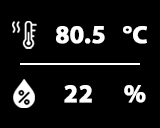
<style>
.page{position:relative;width:160px;height:128px;background:#000000}
.page>*{position:absolute;margin:0}
.t1{font:25px "MyriadPro-Bold";color:#ffffff;font-variant:small-caps;font-weight:bold}
</style>
<div class="page">
<p class="t1" style="left:56px;top:26px;width:49px;height:18px">80.5</p>
<p class="t1" style="left:123px;top:26px;width:24px;height:18px">°C</p>
<p class="t1" style="left:64px;top:85px;width:28px;height:18px">22</p>
<p class="t1" style="left:124px;top:85px;width:22px;height:18px">%</p>
</div>
